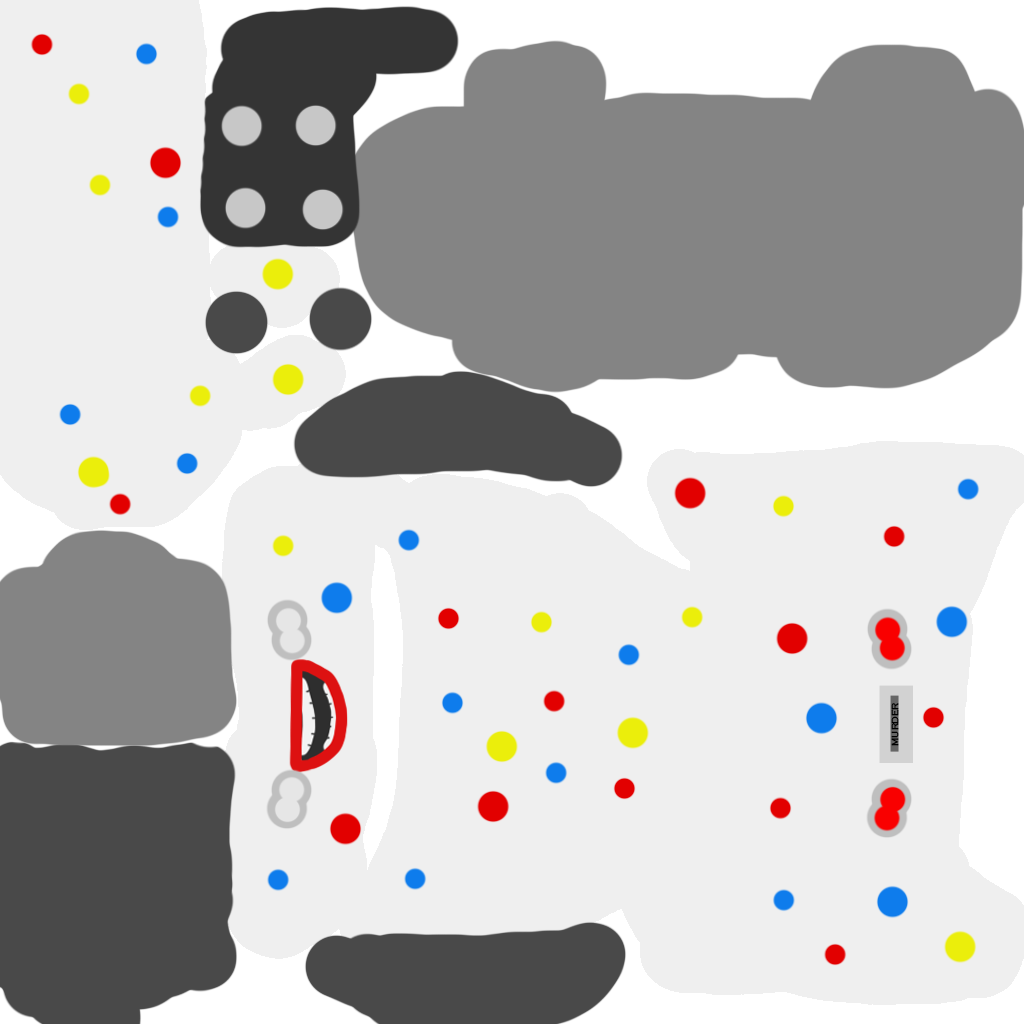
<style>
.page{position:relative;width:1024px;height:1024px;background:#efefef}
.page>*{position:absolute;margin:0}
.t1{font:9px "CopperplateGothic-Light";color:#000000}
</style>
<div class="page">
<p class="t1" style="left:891px;top:703px;width:8px;height:43px;rotate:-90deg">MURDER</p>
</div>
